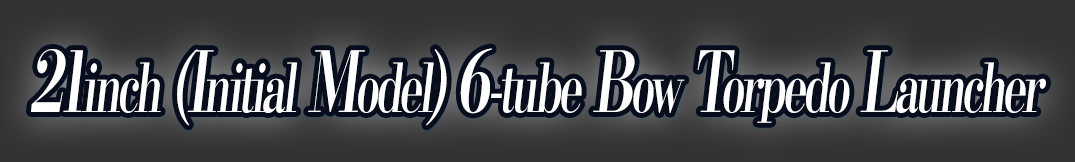
<style>
.page{position:relative;width:1075px;height:162px;background:#333333}
.page>*{position:absolute;margin:0}
.t1{font:67.2px "KochoStd-Heavy";letter-spacing:-0.08em;color:#ffffff;font-style:italic;scale:0.65 1}
.t2{font:84px "KochoStd-Heavy";letter-spacing:-0.08em;color:#ffffff;font-style:italic;scale:0.65 1}
</style>
<div class="page">
<p class="t1" style="left:31px;top:48px;width:1015px;height:78px"><span class="t2">21</span>inch<span class="t2"> (I</span>nitial<span class="t2"> M</span>odel<span class="t2">) 6</span>-tube<span class="t2"> B</span>ow<span class="t2"> T</span>orpedo<span class="t2"> L</span>auncher</p>
</div>
